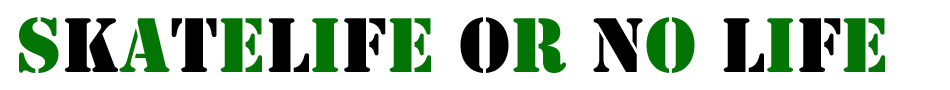
<style>
.page{position:relative;width:950px;height:90px;background:#ffffff}
.page>*{position:absolute;margin:0}
.t1{font:72px "StencilStd";color:#027505}
.t2{font:72px "StencilStd";color:#000000}
</style>
<div class="page">
<p class="t1" style="left:19px;top:17px;width:866px;height:56px">s<span class="t2">k</span>a<span class="t2">t</span>e<span class="t2">l</span>i<span class="t2">f</span>e <span class="t2">o</span>r<span class="t2"> n</span>o<span class="t2"> l</span>i<span class="t2">f</span>e</p>
</div>
